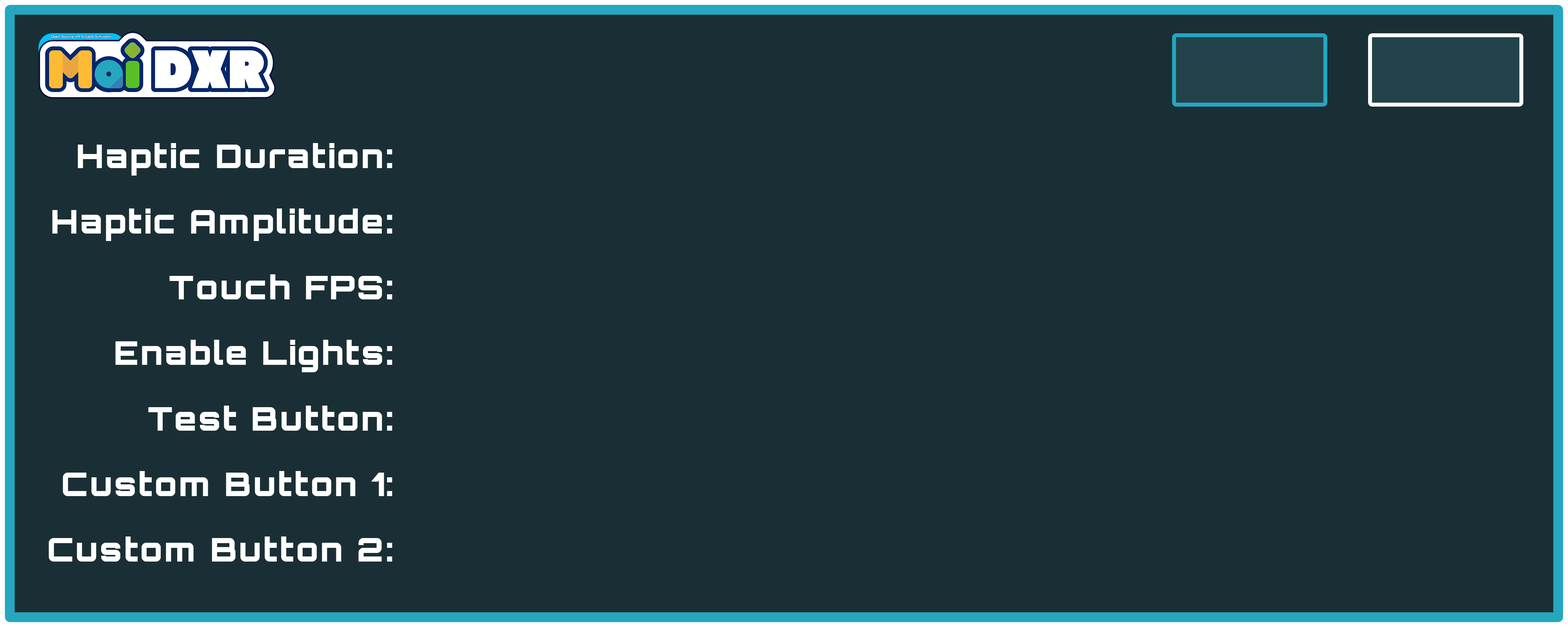
<style>
.page{position:relative;width:1568px;height:627px;background:#1a2f35}
.page>*{position:absolute;margin:0}
.t1{font:32.7px "Orbitron-Black";letter-spacing:0.05em;color:#ffffff}
</style>
<div class="page">
<p class="t1" style="left:78px;top:143px;width:314px;height:33px">Haptic Duration:</p>
<p class="t1" style="left:52px;top:209px;width:340px;height:32px">Haptic Amplitude:</p>
<p class="t1" style="left:169px;top:274px;width:223px;height:25px">Touch FPS:</p>
<p class="t1" style="left:115px;top:340px;width:277px;height:32px">Enable Lights:</p>
<p class="t1" style="left:148px;top:406px;width:244px;height:25px">Test Button:</p>
<p class="t1" style="left:63px;top:471px;width:329px;height:25px">Custom Button 1:</p>
<p class="t1" style="left:49px;top:537px;width:343px;height:25px">Custom Button 2:</p>
</div>
